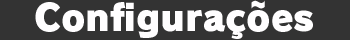
<style>
.page{position:relative;width:350px;height:40px;background:#333333}
.page>*{position:absolute;margin:0}
.t1{font:36px "RodinPro-UB";letter-spacing:-0.002em;color:#fffeff}
</style>
<div class="page">
<p class="t1" style="left:35px;top:0px;width:278px;height:39px">Configurações</p>
</div>
